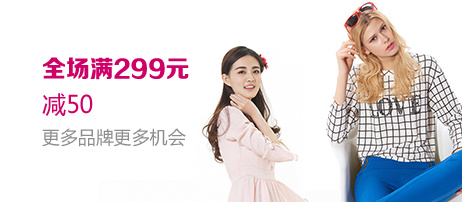
<style>
.page{position:relative;width:462px;height:202px;background:#ffffff}
.page>*{position:absolute;margin:0}
.t1{font:18px/36px "MicrosoftYaHei";color:#8e8c8d}
.t2{font:24px/36px "FZZDHJW--GB1-0";color:#ce0067}
.t3{font:24px/36px "MicrosoftYaHei";color:#ce0067}
</style>
<div class="page">
<p class="t1" style="left:42px;top:57px;width:147px;height:90px"><span class="t2">全场满299元<br></span><span class="t3">减50<br></span>更多品牌更多机会</p>
</div>
